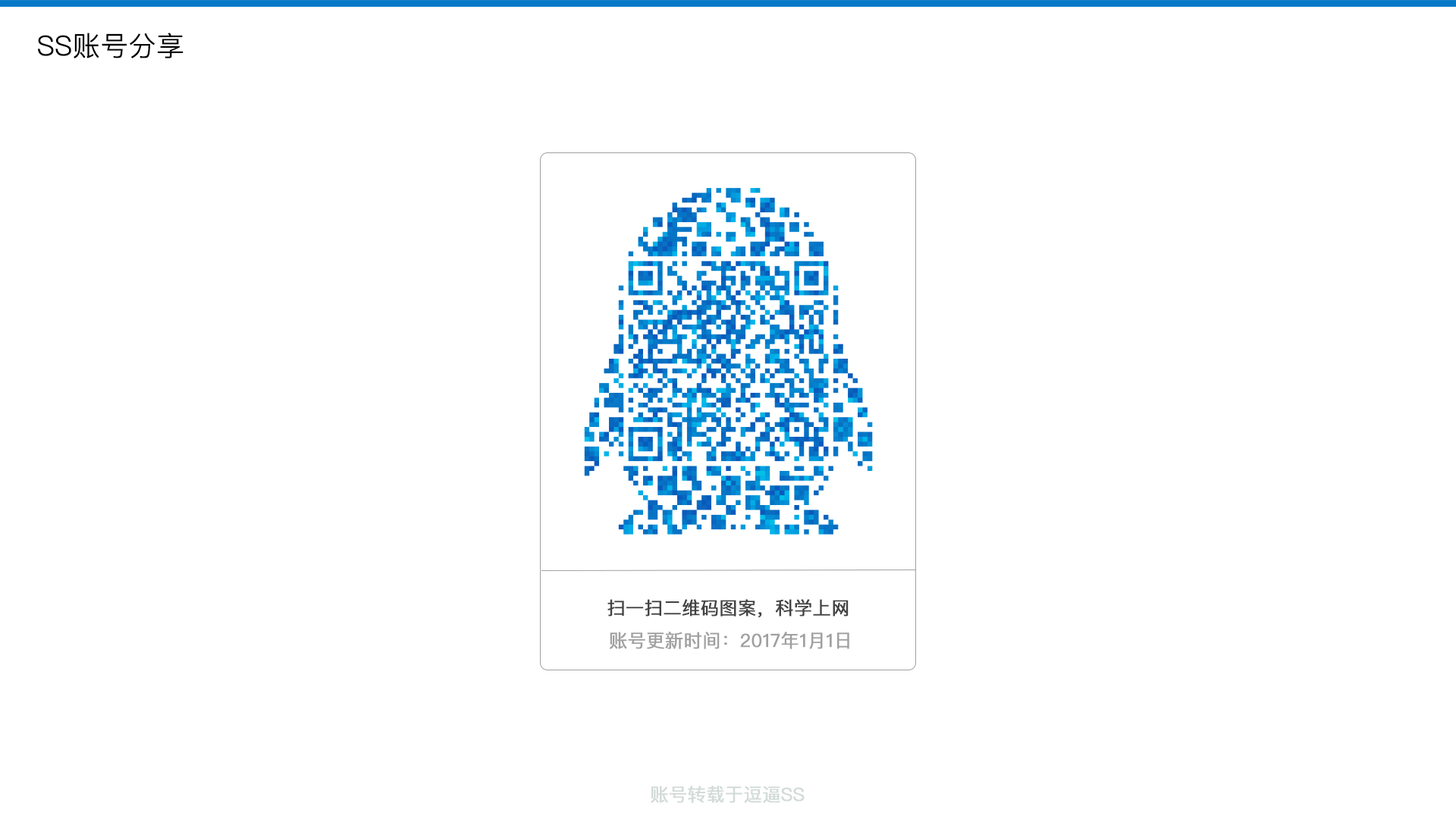
<style>
.page{position:relative;width:1456px;height:819px;background:#ffffff}
.page>*{position:absolute;margin:0}
.t1{font:27.3px "PingFangSC-Light";color:#000000;font-weight:bold}
.t2{font:18.2px "PingFangSC-Regular";color:#434343;font-weight:bold}
.t3{font:18.2px "PingFangSC-Regular";color:#a0a0a0;font-weight:bold}
.t4{font:18.2px "PingFangSC-Regular";color:#d2dbd7;font-weight:bold}
</style>
<div class="page">
<p class="t1" style="left:38px;top:33px;width:146px;height:25px">SS账号分享</p>
<p class="t2" style="left:607px;top:599px;width:242px;height:18px">扫一扫二维码图案，科学上网</p>
<p class="t3" style="left:609px;top:632px;width:240px;height:17px">账号更新时间：2017年1月1日</p>
<p class="t4" style="left:651px;top:786px;width:154px;height:17px">账号转载于逗逼SS</p>
</div>
